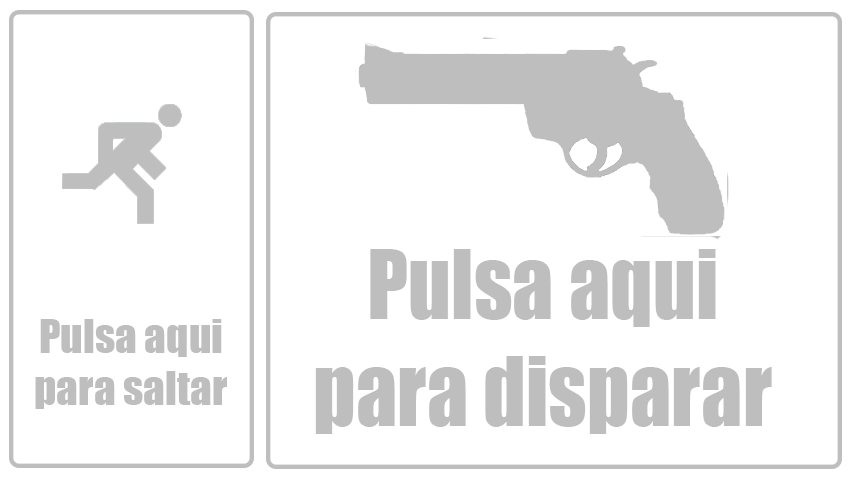
<style>
.page{position:relative;width:854px;height:480px;background:#ffffff}
.page>*{position:absolute;margin:0}
.t1{font:89.4px "Impact";color:#bebebe;scale:0.92 1}
.t2{font:43.2px "Impact";color:#bebebe}
</style>
<div class="page">
<p class="t1" style="left:315px;top:249px;width:457px;height:185px;text-align:center">Pulsa aqui<br>para disparar</p>
<p class="t2" style="left:35px;top:319px;width:192px;height:90px;text-align:center">Pulsa aqui<br>para saltar</p>
</div>
